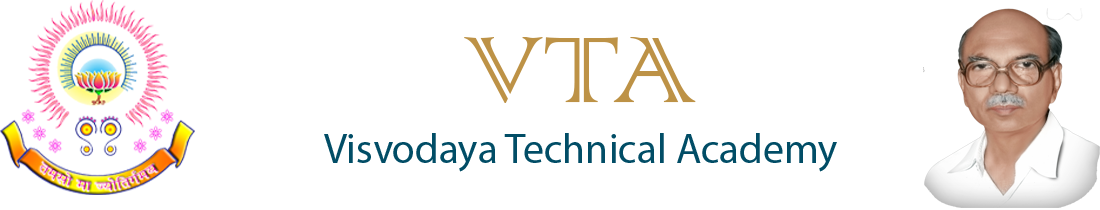
<style>
.page{position:relative;width:1100px;height:210px;background:#ffffff}
.page>*{position:absolute;margin:0}
.t1{font:125px "ColonnaMT";color:#bd9246}
.t2{font:41.7px "MyriadPro-Regular";color:#014d66}
</style>
<div class="page">
<p class="t1" style="left:464px;top:37px;width:232px;height:66px">VTA</p>
<p class="t2" style="left:324px;top:133px;width:513px;height:39px">Visvodaya Technical Academy</p>
</div>
